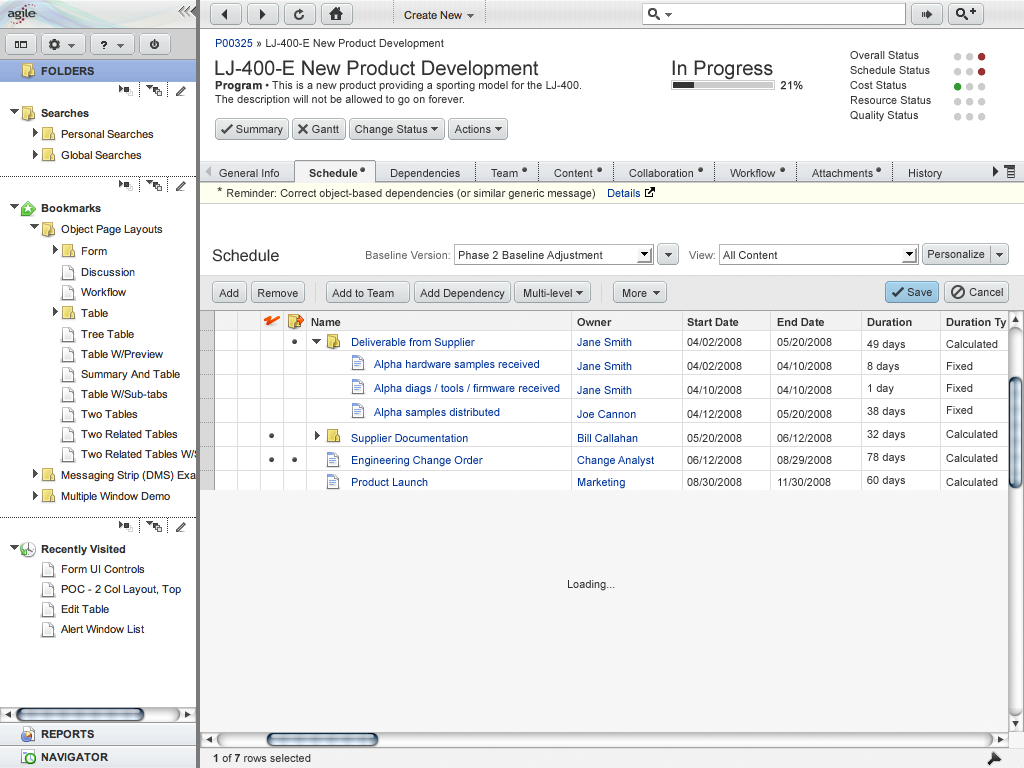
<style>
.page{position:relative;width:1024px;height:768px;background:#ffffff}
.page>*{position:absolute;margin:0}
.t1{font:11px "ArialMT";color:#333333}
.t2{font:11px "ArialMT";color:#003399}
.t3{font:20px "ArialMT";color:#333333}
.t4{font:11px/14px "ArialMT";color:#333333}
.t5{font:11px/14px "Arial-BoldMT";color:#333333;font-weight:bold}
.t6{font:11px "ArialMT";color:#333333;font-weight:bold}
.t7{font:11px "Arial-BoldMT";color:#333333}
.t8{font:14px "ArialMT";color:#333333}
.t9{font:16px "ArialMT";letter-spacing:0.005em;color:#303030}
.t10{font:11px "ArialMT";letter-spacing:0.005em;color:#666666}
.t11{font:11px "ArialMT";letter-spacing:0.005em;color:#303030}
.t12{font:11px "ArialMT";color:#303030}
.t13{font:11px "Arial-BoldMT";color:#303030}
.t14{font:11px/24px "ArialMT";color:#003399}
.t15{font:11px/20px "Arial-BoldMT";color:#303030}
.t16{font:11px/20px "ArialMT";color:#003399}
.t17{font:11px/22px "ArialMT";color:#003399}
.t18{font:11px/24px "ArialMT";color:#303030}
.t19{font:11px/20px "ArialMT";color:#303030}
.t20{font:11px/22px "ArialMT";color:#303030}
.t21{font:11px/23px "ArialMT";color:#333333}
.t22{font:11px/22px "ArialMT";color:#333333}
.t23{font:11px/24px "ArialMT";color:#333333}
</style>
<div class="page">
<p class="t1" style="left:216px;top:39px;width:228px;height:11px"><span class="t2">P00325</span> » LJ-400-E New Product Development</p>
<p class="t3" style="left:215px;top:60px;width:324px;height:19px">LJ-400-E New Product Development</p>
<p class="t3" style="left:672px;top:60px;width:101px;height:20px">In Progress</p>
<p class="t4" style="left:215px;top:81px;width:366px;height:25px"><span class="t5">Program</span> • This is a new product providing a sporting model for the LJ-400.  <br>The description will not be allowed to go on forever.</p>
<p class="t6" style="left:780px;top:81px;width:23px;height:9px">21%</p>
<p class="t1" style="left:236px;top:125px;width:47px;height:11px">Summary</p>
<p class="t1" style="left:312px;top:125px;width:27px;height:8px">Gantt</p>
<p class="t1" style="left:355px;top:125px;width:73px;height:11px">Change Status</p>
<p class="t1" style="left:454px;top:125px;width:37px;height:8px">Actions</p>
<p class="t1" style="left:219px;top:169px;width:60px;height:8px">General Info</p>
<p class="t7" style="left:309px;top:169px;width:49px;height:8px">Schedule</p>
<p class="t1" style="left:391px;top:169px;width:69px;height:11px">Dependencies</p>
<p class="t1" style="left:491px;top:169px;width:27px;height:8px">Team</p>
<p class="t1" style="left:554px;top:169px;width:39px;height:8px">Content</p>
<p class="t1" style="left:629px;top:169px;width:64px;height:8px">Collaboration</p>
<p class="t1" style="left:730px;top:169px;width:46px;height:8px">Workflow</p>
<p class="t1" style="left:812px;top:169px;width:61px;height:8px">Attachments</p>
<p class="t1" style="left:909px;top:169px;width:33px;height:11px">History</p>
<p class="t1" style="left:217px;top:187px;width:378px;height:13px"><span class="t8">* </span>Reminder: Correct object-based dependencies (or similar generic message)</p>
<p class="t2" style="left:608px;top:189px;width:32px;height:8px">Details</p>
<p class="t9" style="left:212px;top:249px;width:67px;height:13px">Schedule</p>
<p class="t10" style="left:366px;top:251px;width:84px;height:8px">Baseline Version:</p>
<p class="t11" style="left:459px;top:251px;width:144px;height:11px">Phase 2 Baseline Adjustment</p>
<p class="t10" style="left:689px;top:251px;width:26px;height:8px">View:</p>
<p class="t11" style="left:723px;top:251px;width:55px;height:8px">All Content</p>
<p class="t12" style="left:928px;top:250px;width:57px;height:8px">Personalize</p>
<p class="t12" style="left:219px;top:289px;width:20px;height:8px">Add</p>
<p class="t12" style="left:258px;top:289px;width:40px;height:8px">Remove</p>
<p class="t12" style="left:332px;top:289px;width:62px;height:8px">Add to Team</p>
<p class="t12" style="left:420px;top:289px;width:85px;height:11px">Add Dependency</p>
<p class="t12" style="left:524px;top:289px;width:48px;height:8px">Multi-level</p>
<p class="t12" style="left:623px;top:289px;width:24px;height:8px">More</p>
<p class="t12" style="left:907px;top:288px;width:25px;height:8px">Save</p>
<p class="t12" style="left:969px;top:288px;width:34px;height:8px">Cancel</p>
<p class="t13" style="left:311px;top:318px;width:30px;height:8px">Name</p>
<p class="t14" style="left:577px;top:318px;width:77px;height:171px"><span class="t15">Owner<br></span><span class="t16">Jane Smith<br></span>Jane Smith <br>Jane Smith<br>Joe Cannon<br>Bill Callahan<br><span class="t17">Change Analyst<br>Marketing</span></p>
<p class="t18" style="left:687px;top:318px;width:55px;height:168px"><span class="t15">Start Date<br></span><span class="t19">04/02/2008<br></span>04/02/2008 <br>04/10/2008<br>04/12/2008<br>05/20/2008<br><span class="t20">06/12/2008<br>08/30/2008</span></p>
<p class="t18" style="left:777px;top:318px;width:55px;height:168px"><span class="t15">End Date<br></span><span class="t19">05/20/2008<br></span>04/10/2008 <br>04/10/2008<br>05/20/2008<br>06/12/2008<br><span class="t20">08/29/2008<br>11/30/2008</span></p>
<p class="t21" style="left:867px;top:318px;width:45px;height:169px"><span class="t15">Duration<br></span><span class="t22">49 days<br>8 days<br>1 day<br></span>38 days<br>32 days<br>78 days<br>60 days</p>
<p class="t23" style="left:946px;top:318px;width:61px;height:168px"><span class="t15">Duration Ty<br></span><span class="t22">Calculated<br>Fixed<br>Fixed<br>Fixed<br></span>Calculated<br>Calculated<br>Calculated</p>
<p class="t17" style="left:351px;top:338px;width:132px;height:148px"><span class="t15"><br></span><span class="t16">Deliverable from Supplier<br><br><br><br></span><span class="t14">Supplier Documentation<br></span>Engineering Change Order<br>Product Launch</p>
<p class="t14" style="left:374px;top:360px;width:186px;height:59px"><span class="t16">Alpha hardware samples received<br></span>Alpha diags / tools / firmware received<br>Alpha samples distributed</p>
<p class="t12" style="left:568px;top:580px;width:47px;height:11px">Loading...</p>
<p class="t12" style="left:213px;top:754px;width:98px;height:8px"><span class="t13">1</span> of <span class="t13">7</span> rows selected</p>
</div>
